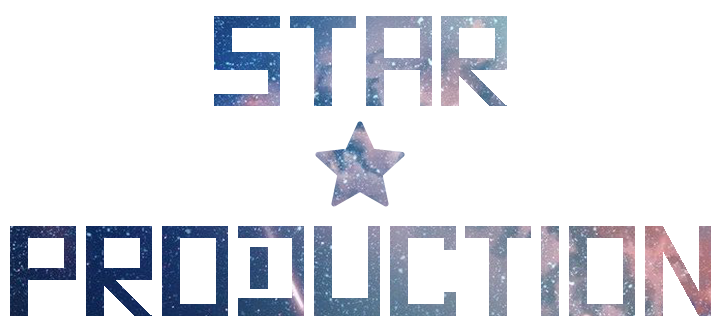
<style>
.page{position:relative;width:720px;height:330px;background:#ffffff}
.page>*{position:absolute;margin:0}
.t1{font:120px "Quadratic_-_Demo"}
</style>
<div class="page">
<p class="t1" style="left:10px;top:16px;width:701px;height:300px;text-align:center">STAR<br>PRODUCTION</p>
</div>
